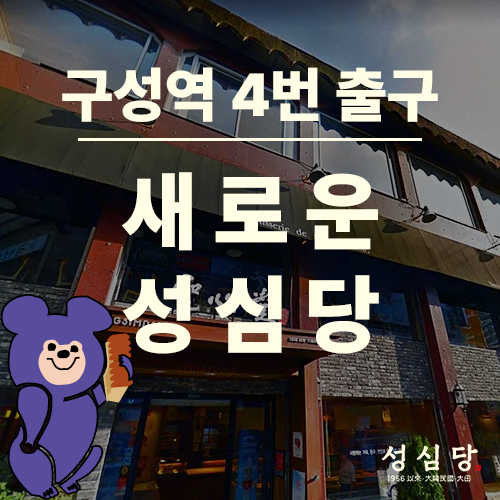
<style>
.page{position:relative;width:500px;height:500px}
.page>*{position:absolute;margin:0}
.t1{font:60px "Pretendard-Black";color:#fffde6}
.t2{font:86.3px "Pretendard-Black";letter-spacing:0.2em;color:#fffde6}
</style>
<div class="page">
<p class="t1" style="left:62px;top:67px;width:376px;height:55px">구성역 4번 출구</p>
<p class="t2" style="left:122px;top:172px;width:257px;height:182px;text-align:center">새로운<br>성심당</p>
</div>
